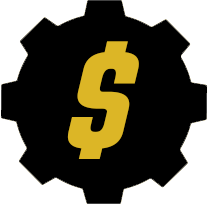
<style>
.page{position:relative;width:208px;height:204px;background:#000000}
.page>*{position:absolute;margin:0}
.t1{font:172px "Overseer-Italic";color:#dcb626;scale:0.9 1}
</style>
<div class="page">
<p class="t1" style="left:67px;top:41px;width:72px;height:118px">$</p>
</div>
